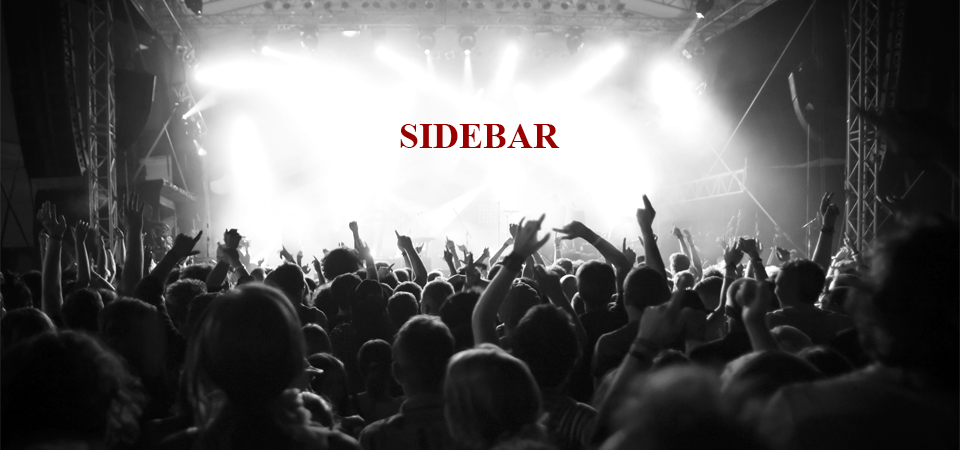
<style>
.page{position:relative;width:960px;height:450px}
.page>*{position:absolute;margin:0}
.t1{font:36px "TimesNewRomanPS-BoldMT";color:#990000}
</style>
<div class="page">
<p class="t1" style="left:400px;top:124px;width:160px;height:24px">SIDEBAR</p>
</div>
